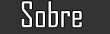
<style>
.page{position:relative;width:110px;height:34px;background:#333333}
.page>*{position:absolute;margin:0}
.t1{font:33.8px "AgencyFB-Reg";color:#ffffff}
</style>
<div class="page">
<p class="t1" style="left:21px;top:1px;width:61px;height:27px">Sobre</p>
</div>
